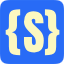
<style>
.page{position:relative;width:64px;height:64px;background:#286bf6}
.page>*{position:absolute;margin:0}
.t1{font:47px "Anton-Regular";color:#fcf8c0}
</style>
<div class="page">
<p class="t1" style="left:5px;top:9px;width:16px;height:47px">{</p>
<p class="t1" style="left:23px;top:11px;width:21px;height:42px">S</p>
<p class="t1" style="left:44px;top:9px;width:16px;height:47px">}</p>
</div>
